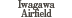
<style>
.page{position:relative;width:72px;height:18px;background:#ffffff}
.page>*{position:absolute;margin:0}
.t1{font:10px/9px "RyuminPro-ExBold";letter-spacing:-0.04em;color:#4c4843;scale:0.9 1}
</style>
<div class="page">
<p class="t1" style="left:18px;top:0px;width:37px;height:17px;text-align:center">Iwagawa<br>Airfield</p>
</div>
